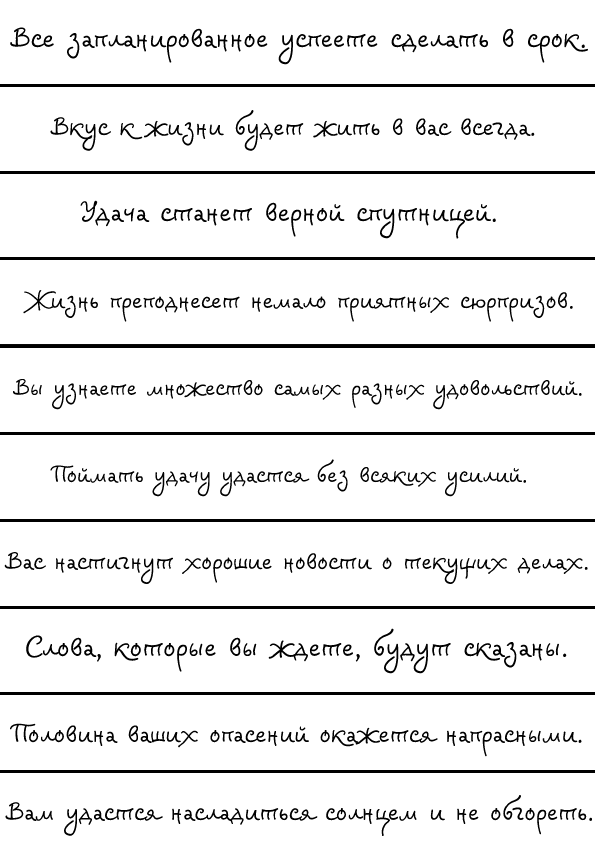
<style>
.page{position:relative;width:595px;height:845px;background:#ffffff}
.page>*{position:absolute;margin:0}
.t1{font:23px "Veles-Regular";color:#000000}
.t2{font:21px "Veles-Regular";color:#000000}
.t3{font:20px "Veles-Regular";color:#000000}
.t4{font:19px "Veles-Regular";color:#000000}
</style>
<div class="page">
<p class="t1" style="left:10px;top:27px;width:579px;height:38px">Все запланированное успеете сделать в срок.</p>
<p class="t2" style="left:50px;top:110px;width:485px;height:41px">Вкус к жизни будет жить в вас всегда.</p>
<p class="t1" style="left:80px;top:200px;width:416px;height:39px">Удача станет верной спутницей.</p>
<p class="t3" style="left:23px;top:290px;width:550px;height:32px">Жизнь преподнесет немало приятных сюрпризов.</p>
<p class="t4" style="left:12px;top:378px;width:570px;height:32px">Вы узнаете множество самых разных удовольствий.</p>
<p class="t4" style="left:50px;top:459px;width:476px;height:38px">Поймать удачу удастся без всяких усилий.</p>
<p class="t3" style="left:4px;top:552px;width:584px;height:32px">Вас настигнут хорошие новости о текущих делах.</p>
<p class="t1" style="left:26px;top:628px;width:541px;height:46px">Слова, которые вы ждете, будут сказаны.</p>
<p class="t2" style="left:9px;top:723px;width:573px;height:34px">Половина ваших опасений окажется напрасными.</p>
<p class="t2" style="left:5px;top:795px;width:588px;height:41px">Вам удастся насладиться солнцем и не обгореть.</p>
</div>
